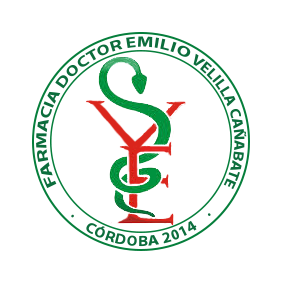
<style>
.page{position:relative;width:283px;height:283px;background:#ffffff}
.page>*{position:absolute;margin:0}
.t1{font:14px "MyriadPro-Bold";color:#0c6d3c}
</style>
<div class="page">
<p class="t1" style="left:36px;top:36px;width:155px;height:153px;rotate:-39deg">FARMACIA DOCTOR EMILIO</p>
<p class="t1" style="left:193px;top:53px;width:54px;height:137px;rotate:77deg">VELILLA CAÑABATE</p>
<p class="t1" style="left:71px;top:213px;width:140px;height:34px;rotate:-3deg">·    CÓRDOBA 2014    ·</p>
</div>
